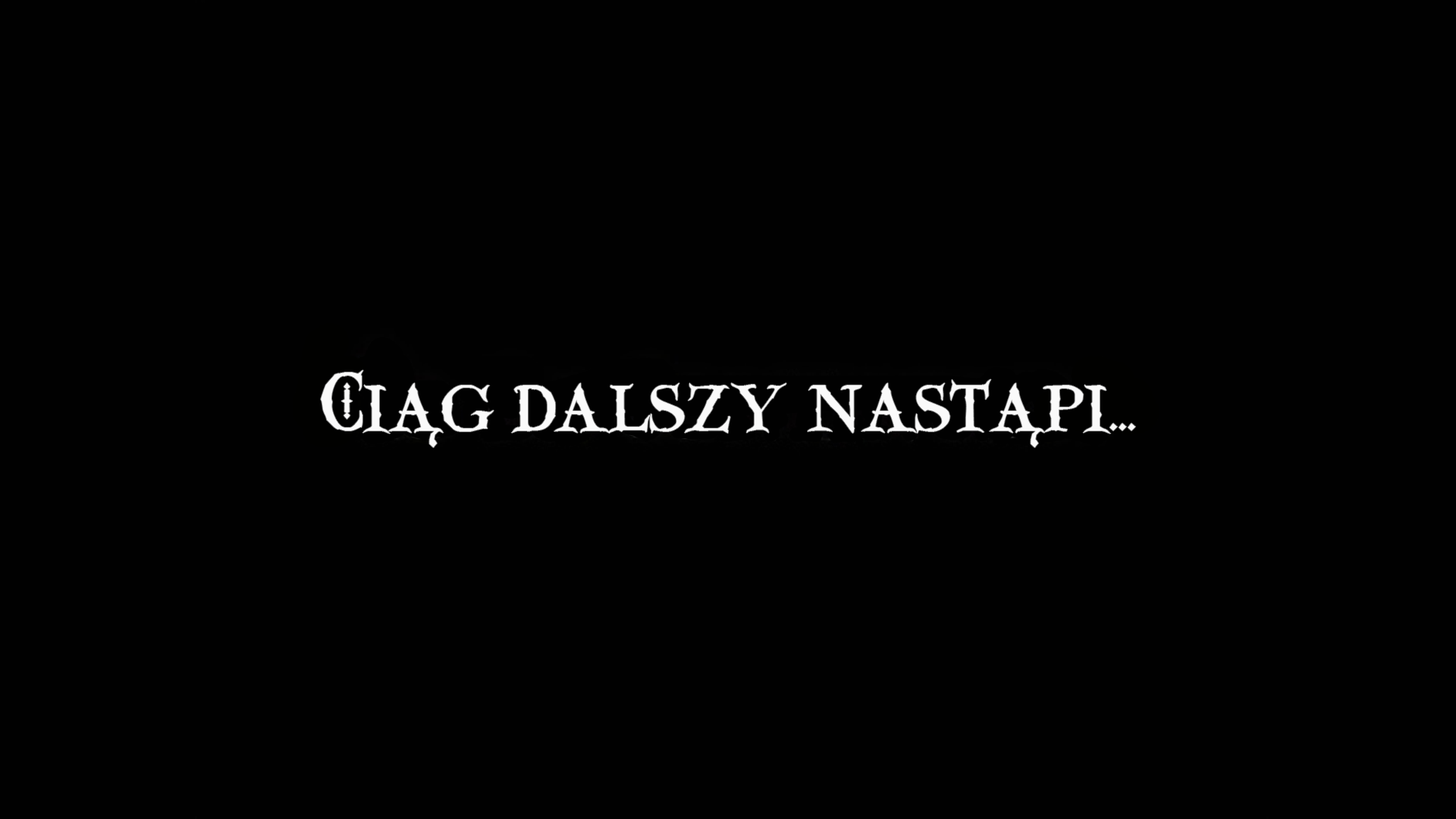
<style>
.page{position:relative;width:1456px;height:819px;background:#010101}
.page>*{position:absolute;margin:0}
.t1{font:72.8px "Valdemar";letter-spacing:-0.02em;color:#fafafa}
</style>
<div class="page">
<p class="t1" style="left:321px;top:370px;width:815px;height:64px">Ciag dalszy nastapi...</p>
<p class="t1" style="left:429px;top:428px;width:11px;height:19px;rotate:180deg">,</p>
<p class="t1" style="left:1031px;top:428px;width:10px;height:19px;rotate:180deg">,</p>
</div>
